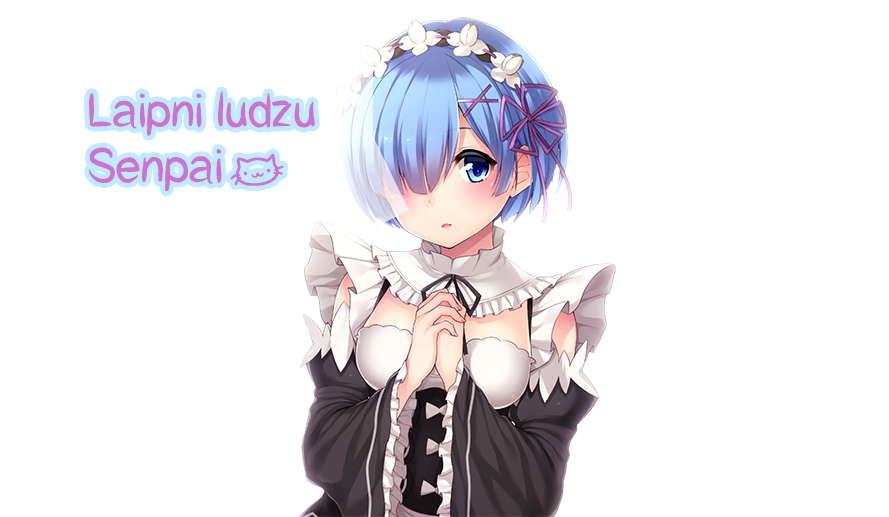
<style>
.page{position:relative;width:889px;height:517px;background:#ffffff}
.page>*{position:absolute;margin:0}
.t1{font:46.3px "CatCafe";color:#ce72d2}
</style>
<div class="page">
<p class="t1" style="left:89px;top:91px;width:226px;height:101px">Laipni ludzu<br>Senpai ^</p>
</div>
